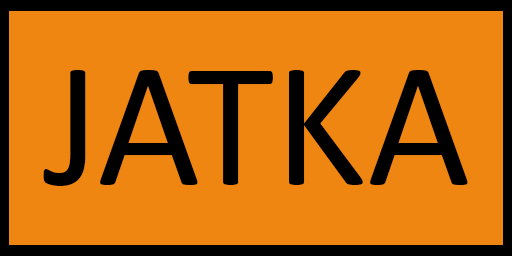
<style>
.page{position:relative;width:512px;height:256px;background:#ef8611}
.page>*{position:absolute;margin:0}
.t1{font:179px "Calibri";color:#000000}
</style>
<div class="page">
<p class="t1" style="left:43px;top:70px;width:425px;height:116px">JATKA</p>
</div>
